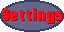
<style>
.page{position:relative;width:64px;height:32px;background:#666688}
.page>*{position:absolute;margin:0}
.t1{font:21px "MotionControl-Bold";color:#ee1122}
.t2{font:21px "MotionControl-Bold"}
</style>
<div class="page">
<p class="t1" style="left:2px;top:8px;width:60px;height:15px">Settings</p>
<p class="t2" style="left:3px;top:9px;width:60px;height:15px">Settings</p>
</div>
